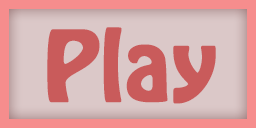
<style>
.page{position:relative;width:256px;height:128px;background:#dbc8c8}
.page>*{position:absolute;margin:0}
.t1{font:86.3px "HoboStd";color:#c95b5b;font-weight:bold}
</style>
<div class="page">
<p class="t1" style="left:47px;top:27px;width:169px;height:77px">Play</p>
</div>
